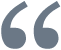
<style>
.page{position:relative;width:61px;height:50px;background:#ffffff}
.page>*{position:absolute;margin:0}
.t1{font:180px "Georgia";letter-spacing:-0.05em;color:#6b7886;text-transform:uppercase}
</style>
<div class="page">
<p class="t1" style="left:1px;top:1px;width:60px;height:48px">“</p>
</div>
